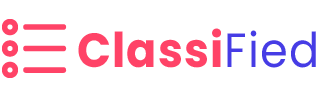
<style>
.page{position:relative;width:330px;height:96px;background:#ffffff}
.page>*{position:absolute;margin:0}
.t1{font:48px "Poppins-Bold";letter-spacing:0.025em;color:#ff4367;scale:0.93 1}
.t2{font:48px "Poppins-Regular";letter-spacing:0.025em;color:#463ce5;scale:0.93 1}
</style>
<div class="page">
<p class="t1" style="left:78px;top:28px;width:238px;height:40px">Classi<span class="t2">Fied</span></p>
</div>
